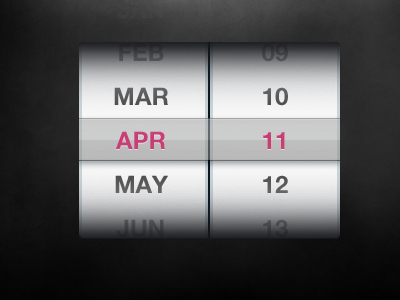
<style>
.page{position:relative;width:400px;height:300px}
.page>*{position:absolute;margin:0}
.t1{font:24px/44px "HelveticaNeueLTPro-Bd"}
</style>
<div class="page">
<p class="t1" style="left:114px;top:0px;width:54px;height:238px;text-align:center">JAN<br>FEB<br>MAR<br>APR<br>MAY<br>JUN</p>
<p class="t1" style="left:262px;top:43px;width:26px;height:195px;text-align:center">09<br>10<br>11<br>12<br>13</p>
</div>
